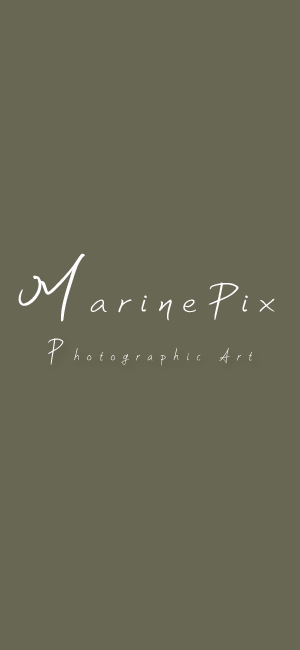
<style>
.page{position:relative;width:300px;height:650px;background:#676753}
.page>*{position:absolute;margin:0}
.t1{font:48px "yleeSD";letter-spacing:0.16em;color:#fffefe;scale:1.26 1}
.t2{font:76px "yleeSD";letter-spacing:0.16em;color:#fffefe;scale:1.26 1}
.t3{font:20px "yleeSD";letter-spacing:0.4em;color:#fffefe;scale:0.93 1}
.t4{font:34px "yleeSD";letter-spacing:0.4em;color:#fffefe;scale:0.93 1}
</style>
<div class="page">
<p class="t1" style="left:18px;top:253px;width:257px;height:69px"><span class="t2">M</span>arinePix</p>
<p class="t3" style="left:47px;top:338px;width:205px;height:28px"><span class="t4">P</span>hotographic Art</p>
</div>
